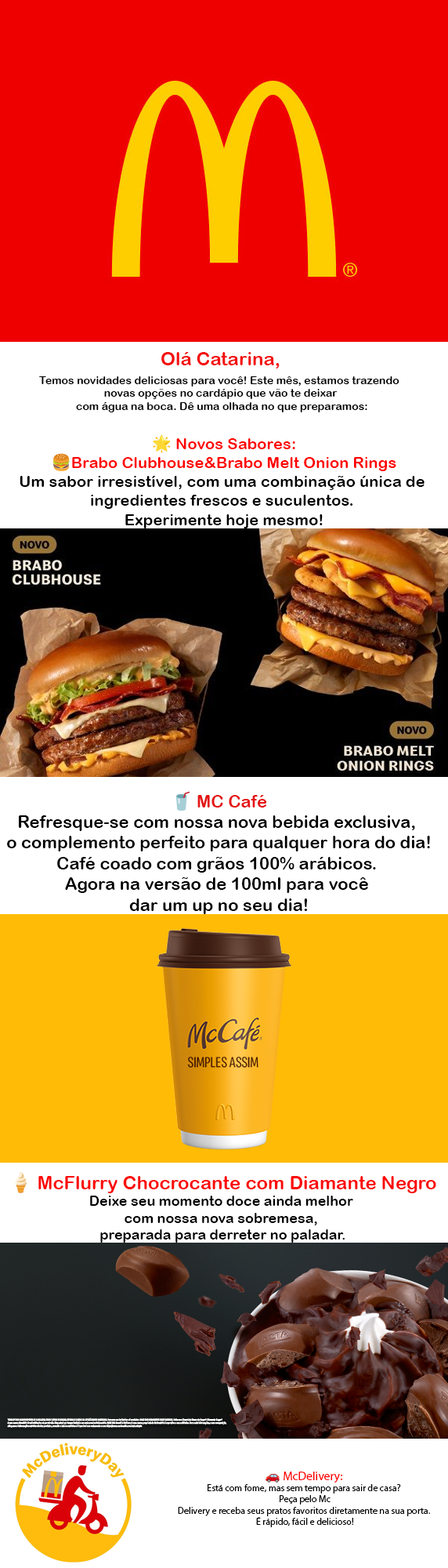
<style>
.page{position:relative;width:448px;height:1568px;background:#ffffff}
.page>*{position:absolute;margin:0}
.t1{font:11px "ArialRoundedMTBold";color:#010101}
.t2{font:18.8px "ArialRoundedMTBold";color:#f41010}
.t3{font:15.9px "ArialRoundedMTBold";color:#000000}
.t4{font:15.9px "NotoColorEmoji-SVG";color:#000000}
.t5{font:15.9px "ArialRoundedMTBold";color:#ff0505}
.t6{font:15.9px "ArialRoundedMTBold";color:#ff0000}
.t7{font:17.3px "ArialRoundedMTBold";color:#000000}
.t8{font:17.3px "NotoColorEmoji-SVG";color:#000000}
.t9{font:17.3px "ArialRoundedMTBold";color:#e51616}
.t10{font:14.1px "ArialRoundedMTBold";color:#000000}
.t11{font:18.8px "NotoColorEmoji-SVG";color:#000000}
.t12{font:18.8px "ArialRoundedMTBold";color:#fc0909}
.t13{font:9.4px "MyriadPro-Regular";color:#030303}
.t14{font:12.2px "NotoColorEmoji-SVG";color:#030303}
.t15{font:12.2px "MyriadPro-Regular";color:#fe0000}
</style>
<div class="page">
<p class="t1" style="left:39px;top:352px;width:361px;height:60px;text-align:center"><span class="t2">Olá Catarina,<br><br></span>Temos novidades deliciosas para você! Este mês, estamos trazendo <br>novas opções no cardápio que vão te deixar<br> com água na boca. Dê uma olhada no que preparamos:</p>
<p class="t3" style="left:20px;top:434px;width:405px;height:94px;text-align:center"><span class="t4">🌟 </span><span class="t5">Novos Sabores:<br></span><span class="t4">🍔</span><span class="t6">Brabo Clubhouse&amp;Brabo Melt Onion Rings<br></span>Um sabor irresistível, com uma combinação única de <br>ingredientes frescos e suculentos. <br>Experimente hoje mesmo!</p>
<p class="t7" style="left:7px;top:791px;width:423px;height:123px;text-align:center"><span class="t8">🥤 </span><span class="t9">MC Café<br></span>Refresque-se com nossa nova bebida exclusiva, <br>o complemento perfeito para qualquer hora do dia!<br>Café coado com grãos 100% arábicos. <br>Agora na versão de 100ml para você <br>dar um up no seu dia!</p>
<p class="t10" style="left:15px;top:1172px;width:422px;height:71px;text-align:center"><span class="t11">🍦</span><span class="t12"> McFlurry Chocrocante com Diamante Negro<br></span>Deixe seu momento doce ainda melhor <br>com nossa nova sobremesa, <br>preparada para derreter no paladar.</p>
<p class="t13" style="left:178px;top:1472px;width:252px;height:55px;text-align:center"><span class="t14">🚗 </span><span class="t15">McDelivery:<br></span>Está com fome, mas sem tempo para sair de casa?<br> Peça pelo Mc<br>Delivery e receba seus pratos favoritos diretamente na sua porta.<br> É rápido, fácil e delicioso!</p>
</div>
